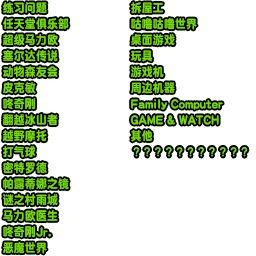
<style>
.page{position:relative;width:256px;height:256px;background:#ffffff}
.page>*{position:absolute;margin:0}
.t1{font:12px/16px "DFPYuanW9";letter-spacing:0.02em;color:#77dd00;scale:0.9 1}
.t2{font:13.2px/16px "DFPYuanW9";letter-spacing:0.02em;color:#77dd00;scale:0.82 1}
.t3{font:13.2px/16px "DFPYuanW9";letter-spacing:0.02em;color:#77dd00;scale:0.73 1}
</style>
<div class="page">
<p class="t1" style="left:3px;top:2px;width:66px;height:252px">练习问题<br>任天堂俱乐部<br>超级马力欧 <br>塞尔达传说 <br>动物森友会<br>皮克敏<br>咚奇刚<br>翻越冰山者<br>越野摩托<br>打气球<br>密特罗德<br>帕露蒂娜之镜<br>谜之村雨城<br>马力欧医生<br>咚奇刚<span class="t2">Jr</span>.<br>恶魔世界</p>
<p class="t1" style="left:130px;top:2px;width:93px;height:140px">拆屋工<br>咕噜咕噜世界<br>桌面游戏<br>玩具<br>游戏机<br>周边机器<br><span class="t2">Family Computer<br>GAME </span><span class="t3">&amp;</span><span class="t2"> WATCH<br></span>其他</p>
</div>
